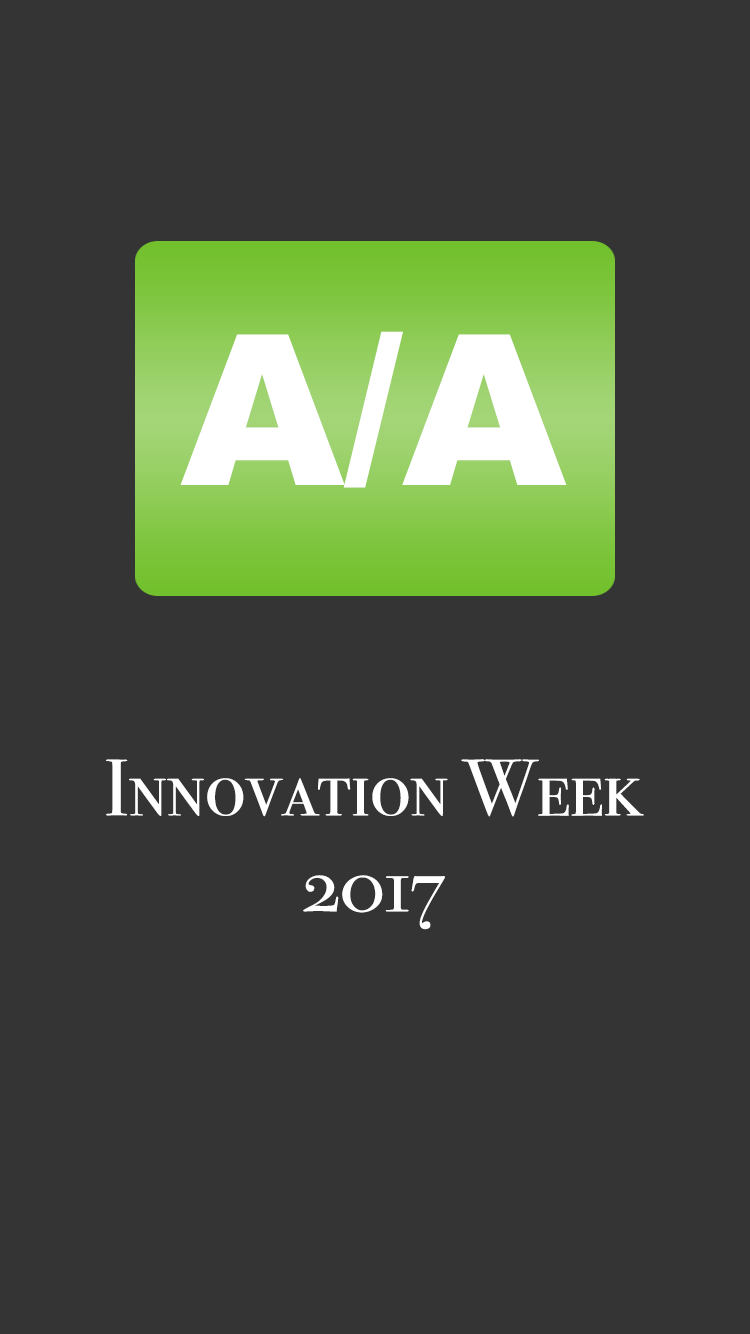
<style>
.page{position:relative;width:750px;height:1334px;background:#343435}
.page>*{position:absolute;margin:0}
.t1{font:210px "Arial-Black";color:#ffffff}
.t2{font:80px "BodoniSvtyTwoSCITCTT-Book";color:#ffffff}
</style>
<div class="page">
<p class="t1" style="left:180px;top:331px;width:387px;height:157px">A/A</p>
<p class="t2" style="left:106px;top:759px;width:538px;height:171px;text-align:center">Innovation Week<br>2017</p>
</div>
